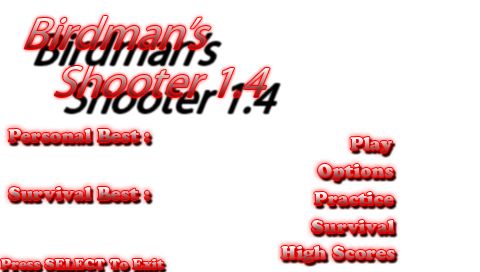
<style>
.page{position:relative;width:480px;height:272px;background:#ffffff}
.page>*{position:absolute;margin:0}
.t1{font:18px "CooperBlackStd"}
.t2{font:14px "CooperBlackStd"}
</style>
<div class="page">
<p class="t1" style="left:8px;top:129px;width:142px;height:13px">Personal Best :</p>
<p class="t1" style="left:350px;top:137px;width:43px;height:16px">Play</p>
<p class="t1" style="left:318px;top:164px;width:75px;height:16px">Options</p>
<p class="t1" style="left:8px;top:187px;width:142px;height:13px">Survival Best :</p>
<p class="t1" style="left:314px;top:192px;width:80px;height:13px">Practice</p>
<p class="t1" style="left:311px;top:220px;width:83px;height:13px">Survival</p>
<p class="t1" style="left:281px;top:246px;width:114px;height:16px">High Scores</p>
<p class="t2" style="left:0px;top:258px;width:164px;height:11px">Press SELECT To Exit</p>
</div>
